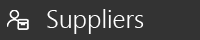
<style>
.page{position:relative;width:200px;height:40px;background:#333333}
.page>*{position:absolute;margin:0}
.t1{font:25px "SegoeUI-Semilight";color:#ffffff}
</style>
<div class="page">
<p class="t1" style="left:47px;top:9px;width:97px;height:25px">Suppliers</p>
</div>
